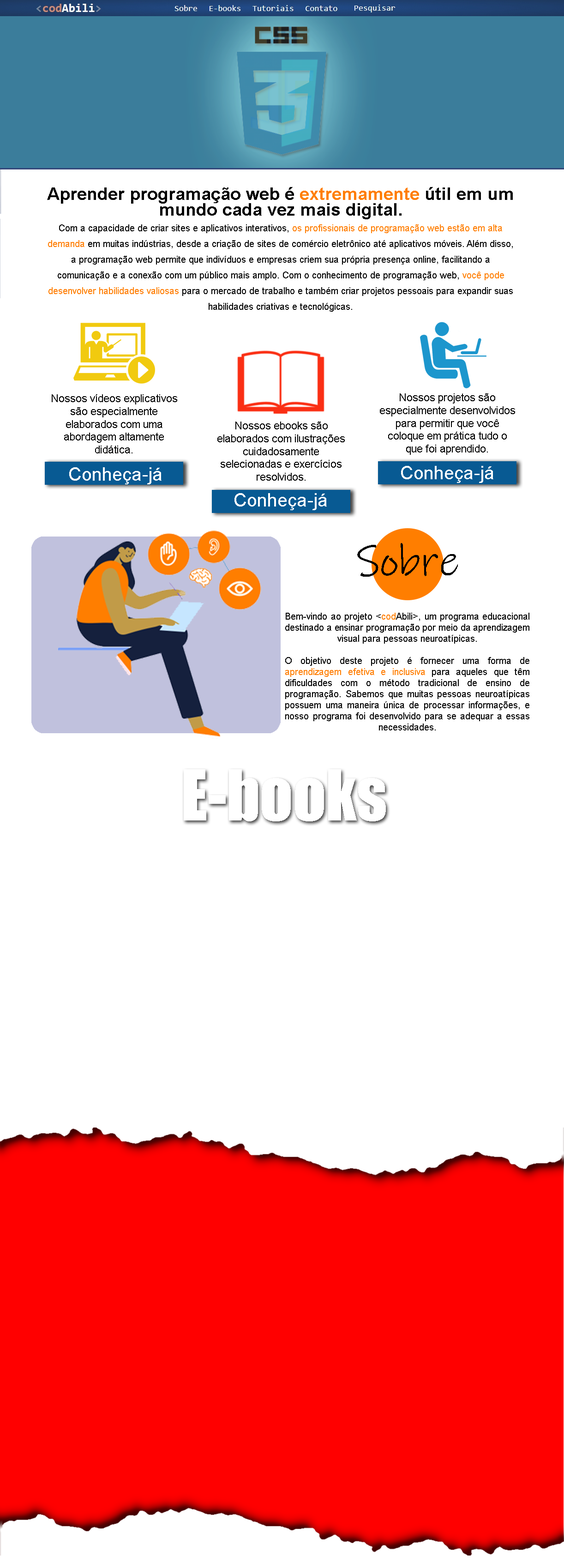
<style>
.page{position:relative;width:564px;height:1568px;background:#ffffff}
.page>*{position:absolute;margin:0}
.t1{font:9.2px/15.7px "ArialMT";color:#000000}
.t2{font:17.5px/15.7px "Arial-BoldMT";color:#000000}
.t3{font:17.5px/15.7px "Arial-BoldMT";color:#ff7e00}
.t4{font:9.2px/15.7px "ArialMT";color:#ff7e00}
.t5{font:10.6px "ArialMT";color:#000000}
.t6{font:18.4px "ArialMT";color:#ffffff}
.t7{font:9.2px "ArialMT";color:#000000}
.t8{font:43.9px "InkFree";color:#000000}
.t9{font:9.2px "ArialMT";color:#ff7e00}
.t10{font:64.5px "Impact";color:#ffffff}
</style>
<div class="page">
<p class="t1" style="left:47px;top:187px;width:466px;height:125px;text-align:center"><span class="t2">Aprender programação web é </span><span class="t3">extremamente</span><span class="t2"> útil em um mundo cada vez mais digital.<br></span>Com a capacidade de criar sites e aplicativos interativos, <span class="t4">os profissionais de programação web estão em alta demanda</span> em muitas indústrias, desde a criação de sites de comércio eletrônico até aplicativos móveis. Além disso, a programação web permite que indivíduos e empresas criem sua própria presença online, facilitando a comunicação e a conexão com um público mais amplo. Com o conhecimento de programação web, <span class="t4">você pode desenvolver habilidades valiosas</span> para o mercado de trabalho e também criar projetos pessoais para expandir suas habilidades criativas e tecnológicas.</p>
<p class="t5" style="left:52px;top:394px;width:125px;height:59px;text-align:center">Nossos vídeos explicativos são especialmente elaborados com uma abordagem altamente didática.</p>
<p class="t5" style="left:380px;top:393px;width:135px;height:62px;text-align:center">Nossos projetos são especialmente desenvolvidos para permitir que você coloque em prática tudo o que foi aprendido.</p>
<p class="t5" style="left:217px;top:422px;width:128px;height:59px;text-align:center">Nossos ebooks são elaborados com ilustrações cuidadosamente selecionadas e exercícios resolvidos.</p>
<p class="t6" style="left:69px;top:467px;width:93px;height:17px">Conheça-já</p>
<p class="t6" style="left:401px;top:466px;width:93px;height:17px">Conheça-já</p>
<p class="t6" style="left:235px;top:493px;width:92px;height:17px">Conheça-já</p>
<p class="t7" style="left:285px;top:543px;width:245px;height:187px;text-align:justify"><span class="t8">Sobre<br></span><br><br><br>Bem-vindo ao projeto &lt;<span class="t9">cod</span>Abili&gt;, um programa educacional destinado a ensinar programação por meio da aprendizagem visual para pessoas neuroatípicas.<br><br>O objetivo deste projeto é fornecer uma forma de <span class="t9">aprendizagem efetiva e inclusiva</span> para aqueles que têm dificuldades com o método tradicional de ensino de programação. Sabemos que muitas pessoas neuroatípicas possuem uma maneira única de processar informações, e nosso programa foi desenvolvido para se adequar a essas necessidades.</p>
<p class="t10" style="left:184px;top:769px;width:202px;height:52px">E-books</p>
</div>
